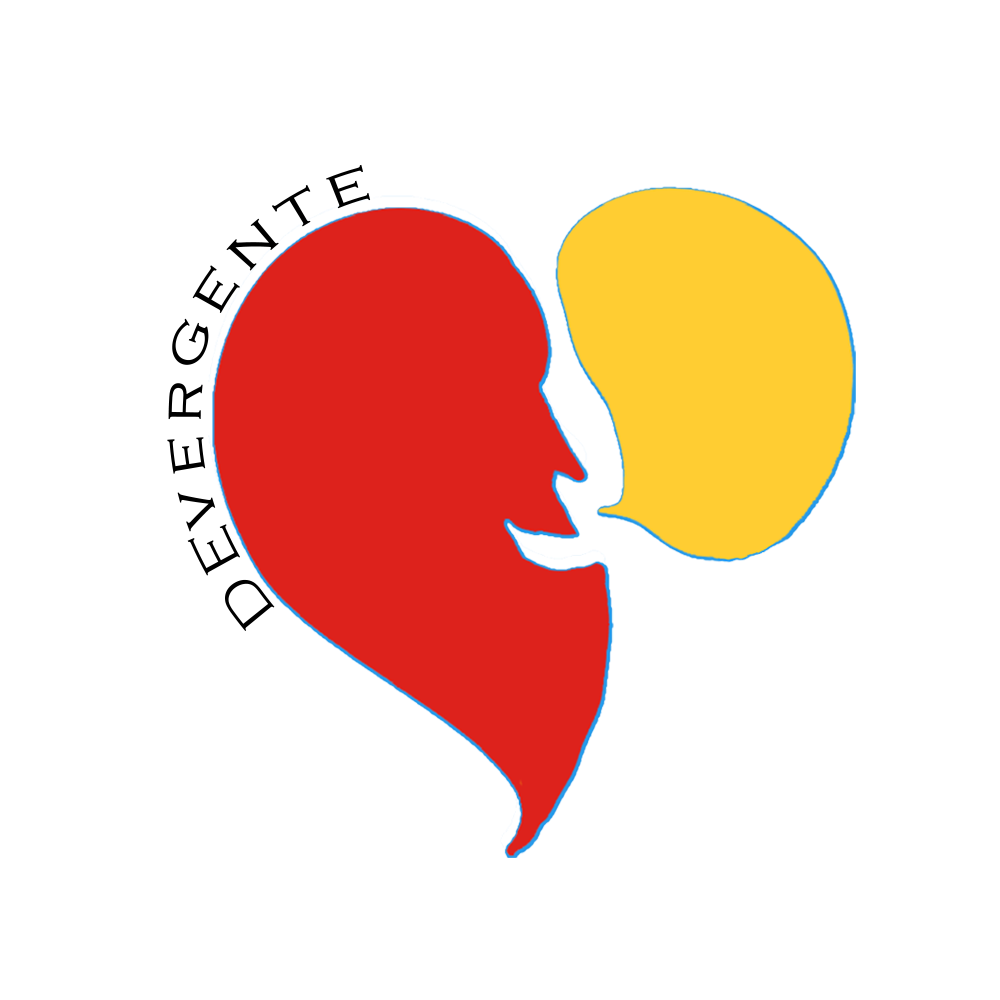
<style>
.page{position:relative;width:1000px;height:1000px;background:#ffffff}
.page>*{position:absolute;margin:0}
.t1{font:58.3px "CopperplateGothic-Light";letter-spacing:0.2em;color:#000000}
.t2{font:56.5px "CopperplateGothic-Light";letter-spacing:0.2em;color:#000000}
</style>
<div class="page">
<p class="t1" style="left:172px;top:164px;width:199px;height:201px;rotate:-43deg">gente</p>
<p class="t1" style="left:167px;top:383px;width:49px;height:149px;rotate:-96deg">ver</p>
<p class="t2" style="left:187px;top:524px;width:88px;height:107px;rotate:-121deg">DE</p>
</div>
